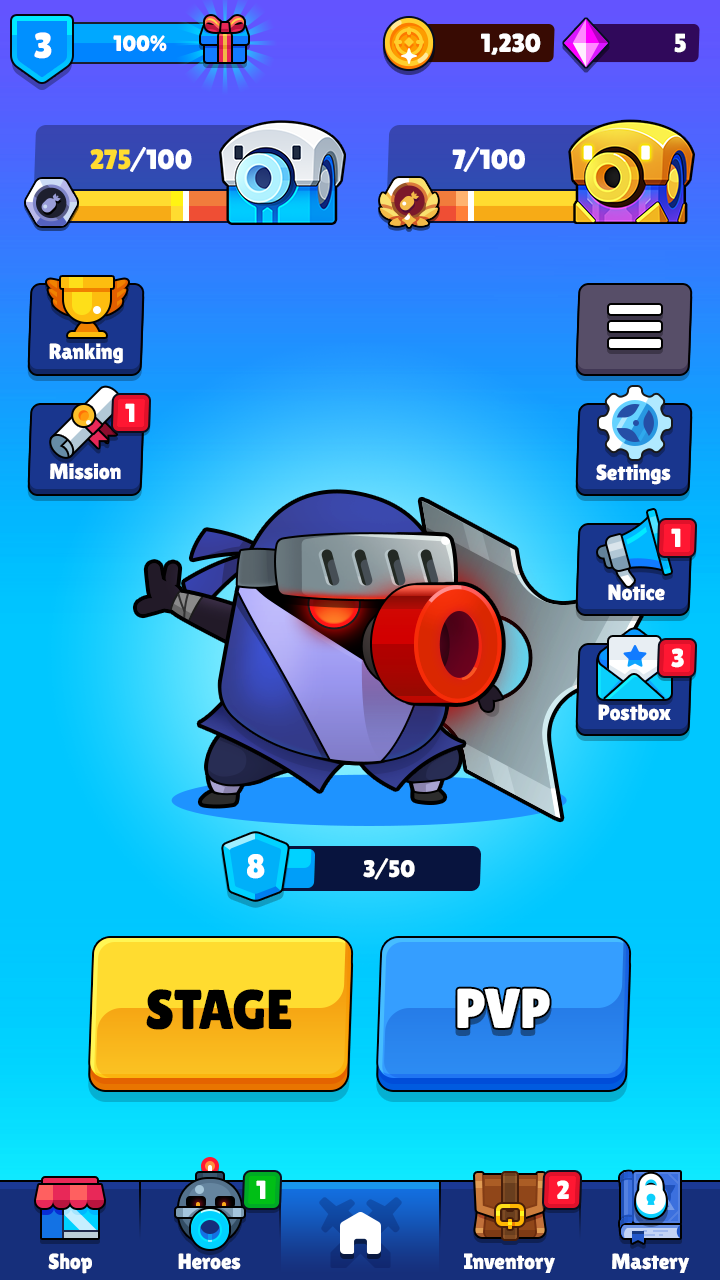
<style>
.page{position:relative;width:720px;height:1280px}
.page>*{position:absolute;margin:0}
.t1{font:36px "LilitaOne";color:#ffffff}
.t2{font:22px "LilitaOne";color:#ffffff}
.t3{font:26px "LilitaOne";letter-spacing:-0.01em;color:#ffffff;text-transform:uppercase}
.t4{font:28px "LilitaOne";color:#ffffff;text-transform:uppercase}
.t5{font:28px "LilitaOne";color:#ffdc30;text-transform:uppercase}
.t6{font:26px "LilitaOne";color:#ffffff;text-transform:uppercase}
.t7{font:34px "LilitaOne";color:#ffffff;text-transform:uppercase}
.t8{font:24px "LilitaOne";color:#ffffff;text-transform:uppercase}
.t9{font:56px "LilitaOne";color:#000000;text-transform:uppercase}
.t10{font:56px "LilitaOne";color:#ffffff}
</style>
<div class="page">
<p class="t1" style="left:34px;top:32px;width:18px;height:27px">3</p>
<p class="t2" style="left:113px;top:35px;width:54px;height:17px">100%</p>
<p class="t3" style="left:481px;top:33px;width:60px;height:22px">1,230</p>
<p class="t3" style="left:674px;top:33px;width:12px;height:20px">5</p>
<p class="t4" style="left:90px;top:147px;width:102px;height:25px"><span class="t5">275</span>/100</p>
<p class="t4" style="left:452px;top:147px;width:73px;height:25px">7/100</p>
<p class="t2" style="left:49px;top:343px;width:74px;height:21px">Ranking</p>
<p class="t6" style="left:125px;top:403px;width:10px;height:19px">1</p>
<p class="t2" style="left:50px;top:463px;width:71px;height:17px">Mission</p>
<p class="t2" style="left:596px;top:464px;width:75px;height:21px">Settings</p>
<p class="t6" style="left:671px;top:528px;width:10px;height:19px">1</p>
<p class="t2" style="left:608px;top:584px;width:57px;height:17px">Notice</p>
<p class="t6" style="left:671px;top:648px;width:13px;height:20px">3</p>
<p class="t2" style="left:598px;top:704px;width:73px;height:17px">Postbox</p>
<p class="t7" style="left:247px;top:854px;width:18px;height:25px">8</p>
<p class="t8" style="left:363px;top:858px;width:52px;height:22px">3/50</p>
<p class="t9" style="left:146px;top:989px;width:146px;height:41px">Stage</p>
<p class="t10" style="left:457px;top:988px;width:93px;height:40px">PVP</p>
<p class="t6" style="left:256px;top:1180px;width:10px;height:19px">1</p>
<p class="t6" style="left:557px;top:1180px;width:12px;height:19px">2</p>
<p class="t2" style="left:48px;top:1253px;width:44px;height:21px">Shop</p>
<p class="t2" style="left:178px;top:1253px;width:63px;height:17px">Heroes</p>
<p class="t2" style="left:464px;top:1253px;width:91px;height:20px">Inventory</p>
<p class="t2" style="left:612px;top:1253px;width:78px;height:20px">Mastery</p>
</div>
